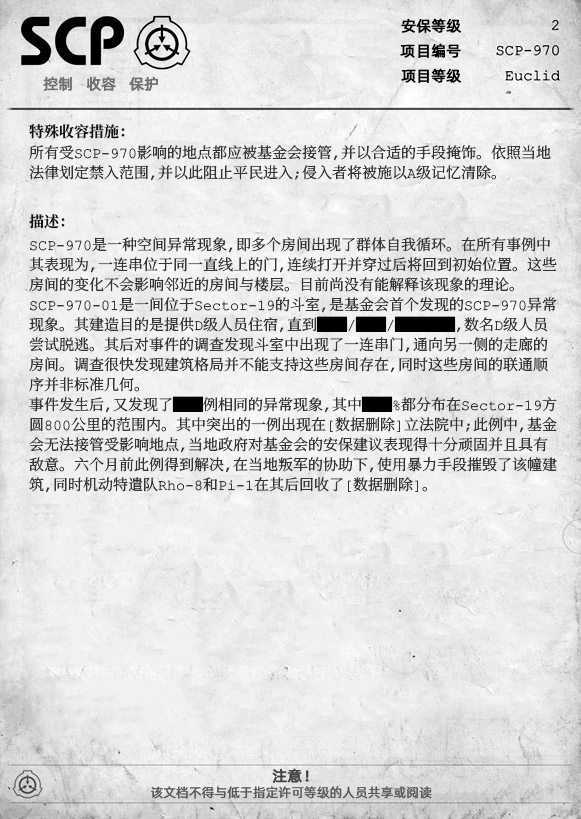
<style>
.page{position:relative;width:581px;height:819px}
.page>*{position:absolute;margin:0}
.t1{font:15px "AlibabaPuHuiTiR";color:#000000;font-weight:bold}
.t2{font:15px "AlibabaPuHuiTiR";color:#707070;font-weight:bold}
.t3{font:15px "ContainmentBreach-Bold";color:#121212}
.t4{font:15px/20px "ContainmentBreach-Regular";color:#353535}
.t5{font:15px/20px "ContainmentBreach-Regular";color:#000000}
.t6{font:15px/20px "ContainmentBreach-Regular";color:#010101}
.t7{font:15px "AlibabaPuHuiTiR";color:#414141;font-weight:bold}
.t8{font:13px "AlibabaPuHuiTiR";color:#575757}
</style>
<div class="page">
<p class="t1" style="left:401px;top:18px;width:61px;height:15px">安保等级</p>
<p class="t1" style="left:400px;top:43px;width:61px;height:15px">项目编号</p>
<p class="t2" style="left:43px;top:76px;width:115px;height:15px">控制   收容   保护</p>
<p class="t1" style="left:401px;top:68px;width:61px;height:15px">项目等级</p>
<p class="t3" style="left:29px;top:124px;width:96px;height:15px">特殊收容措施：</p>
<p class="t4" style="left:29px;top:145px;width:522px;height:36px">所有受SCP-970影响的地点都应被基金会接管，并以合适的手段掩饰。依照当地<br>法律划定禁入范围，并以此阻止平民进入；侵入者将被施以A级记忆清除。</p>
<p class="t3" style="left:29px;top:214px;width:36px;height:15px">描述：</p>
<p class="t4" style="left:29px;top:237px;width:528px;height:256px">SCP-970是一种空间异常现象，即多个房间出现了群体自我循环。在所有事例中<br>其表现为，一连串位于同一直线上的门，连续打开并穿过后将回到初始位置。这些<br>房间的变化不会影响邻近的房间与楼层。目前尚没有能解释该现象的理论。<br>SCP-970-01是一间位于Sector-19的斗室，是基金会首个发现的SCP-970异常<br>现象。其建造目的是提供D级人员住宿，直到<span class="t5">██</span>/<span class="t6">██</span>/<span class="t5">████</span>，数名D级人员<br>尝试脱逃。其后对事件的调查发现斗室中出现了一连串门，通向另一侧的走廊的<br>房间。调查很快发现建筑格局并不能支持这些房间存在，同时这些房间的联通顺<br>序并非标准几何。<br>事件发生后，又发现了<span class="t5">██</span>例相同的异常现象，其中<span class="t5">██</span>%都分布在Sector-19方<br>圆800公里的范围内。其中突出的一例出现在[数据删除]立法院中；此例中，基金<br>会无法接管受影响地点，当地政府对基金会的安保建议表现得十分顽固并且具有<br>敌意。六个月前此例得到解决，在当地叛军的协助下，使用暴力手段摧毁了该幢建<br>筑，同时机动特遣队Rho-8和Pi-1在其后回收了[数据删除]。</p>
<p class="t7" style="left:272px;top:768px;width:37px;height:15px">注意！</p>
<p class="t8" style="left:151px;top:786px;width:281px;height:13px">该文档不得与低于指定许可等级的人员共享或阅读</p>
</div>
